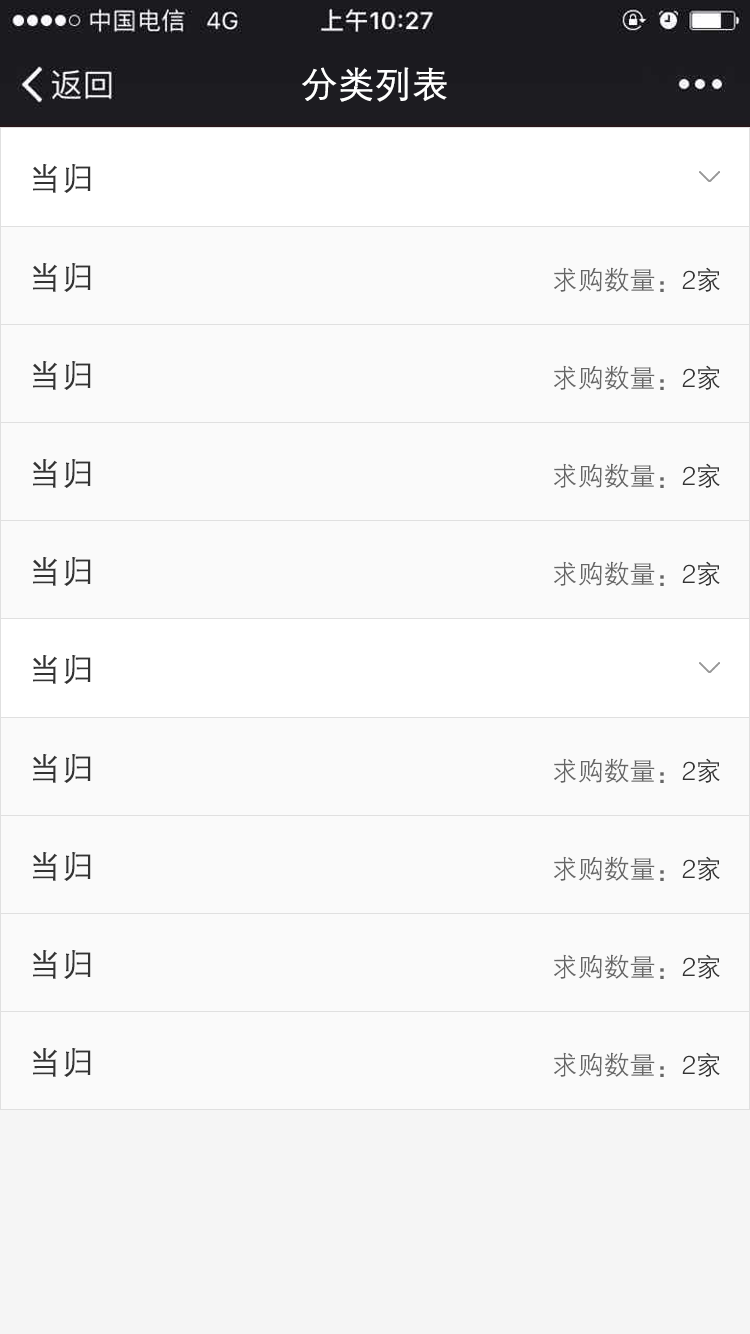
<style>
.page{position:relative;width:750px;height:1334px;background:#fafafa}
.page>*{position:absolute;margin:0}
.t1{font:36px "FZZDXJW--GB1-0";color:#ffffff;font-weight:bold}
.t2{font:32px "FZZDXJW--GB1-0";color:#333333;font-weight:bold}
.t3{font:26px "FZZDXJW--GB1-0";color:#666666}
.t4{font:26px "FZZDXJW--GB1-0";color:#333333}
</style>
<div class="page">
<p class="t1" style="left:302px;top:67px;width:145px;height:35px">分类列表</p>
<p class="t2" style="left:33px;top:164px;width:58px;height:29px">当归</p>
<p class="t2" style="left:33px;top:263px;width:58px;height:29px">当归</p>
<p class="t3" style="left:554px;top:267px;width:166px;height:25px">求购数量：<span class="t4">2家</span></p>
<p class="t2" style="left:33px;top:361px;width:58px;height:29px">当归</p>
<p class="t3" style="left:554px;top:365px;width:166px;height:25px">求购数量：<span class="t4">2家</span></p>
<p class="t2" style="left:33px;top:459px;width:58px;height:29px">当归</p>
<p class="t3" style="left:554px;top:463px;width:166px;height:25px">求购数量：<span class="t4">2家</span></p>
<p class="t2" style="left:33px;top:557px;width:58px;height:29px">当归</p>
<p class="t3" style="left:554px;top:561px;width:166px;height:25px">求购数量：<span class="t4">2家</span></p>
<p class="t2" style="left:33px;top:655px;width:58px;height:29px">当归</p>
<p class="t2" style="left:33px;top:754px;width:58px;height:29px">当归</p>
<p class="t3" style="left:554px;top:758px;width:166px;height:25px">求购数量：<span class="t4">2家</span></p>
<p class="t2" style="left:33px;top:852px;width:58px;height:29px">当归</p>
<p class="t3" style="left:554px;top:856px;width:166px;height:25px">求购数量：<span class="t4">2家</span></p>
<p class="t2" style="left:33px;top:950px;width:58px;height:29px">当归</p>
<p class="t3" style="left:554px;top:954px;width:166px;height:25px">求购数量：<span class="t4">2家</span></p>
<p class="t2" style="left:33px;top:1048px;width:58px;height:29px">当归</p>
<p class="t3" style="left:554px;top:1052px;width:166px;height:25px">求购数量：<span class="t4">2家</span></p>
</div>
